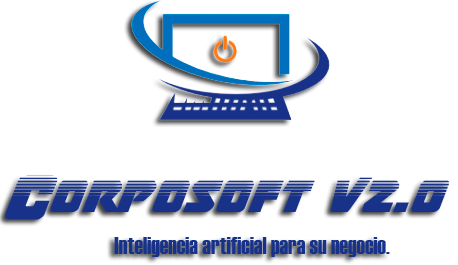
<style>
.page{position:relative;width:458px;height:265px;background:#ffffff}
.page>*{position:absolute;margin:0}
.t1{font:48px "ThunderstrikeHalftone";color:#173288}
.t2{font:24px "Haettenschweiler";color:#173288}
</style>
<div class="page">
<p class="t1" style="left:5px;top:175px;width:444px;height:45px">Corposoft v2.0</p>
<p class="t2" style="left:114px;top:237px;width:276px;height:20px">Inteligencia artificial para su negocio.</p>
</div>
